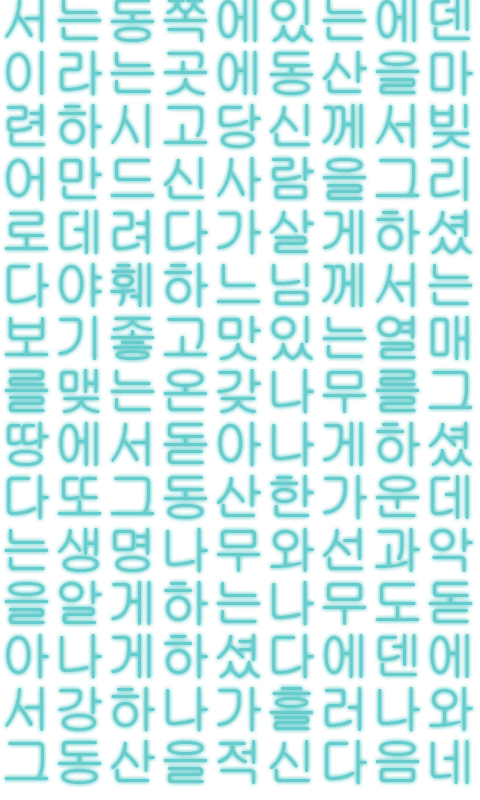
<style>
.page{position:relative;width:480px;height:800px;background:#ffffff}
.page>*{position:absolute;margin:0}
.t1{font:53px/53px "Gulim";color:#66cccc}
</style>
<div class="page">
<p class="t1" style="left:4px;top:0px;width:469px;height:785px">서는동쪽에있는에덴<br>이라는곳에동산을마<br>련하시고당신께서빚<br>어만드신사람을그리<br>로데려다가살게하셨<br>다야훼하느님께서는<br>보기좋고맛있는열매<br>를맺는온갖나무를그<br>땅에서돋아나게하셨<br>다또그동산한가운데<br>는생명나무와선과악<br>을알게하는나무도돋<br>아나게하셨다에덴에<br>서강하나가흘러나와<br>그동산을적신다음네</p>
</div>
